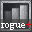
<style>
.page{position:relative;width:32px;height:32px}
.page>*{position:absolute;margin:0}
.t1{font:10px "Century";color:#ffffff}
.t2{font:10px "Century";color:#fc0000}
</style>
<div class="page">
<p class="t1" style="left:1px;top:22px;width:30px;height:8px">rogue<span class="t2">+</span></p>
</div>
